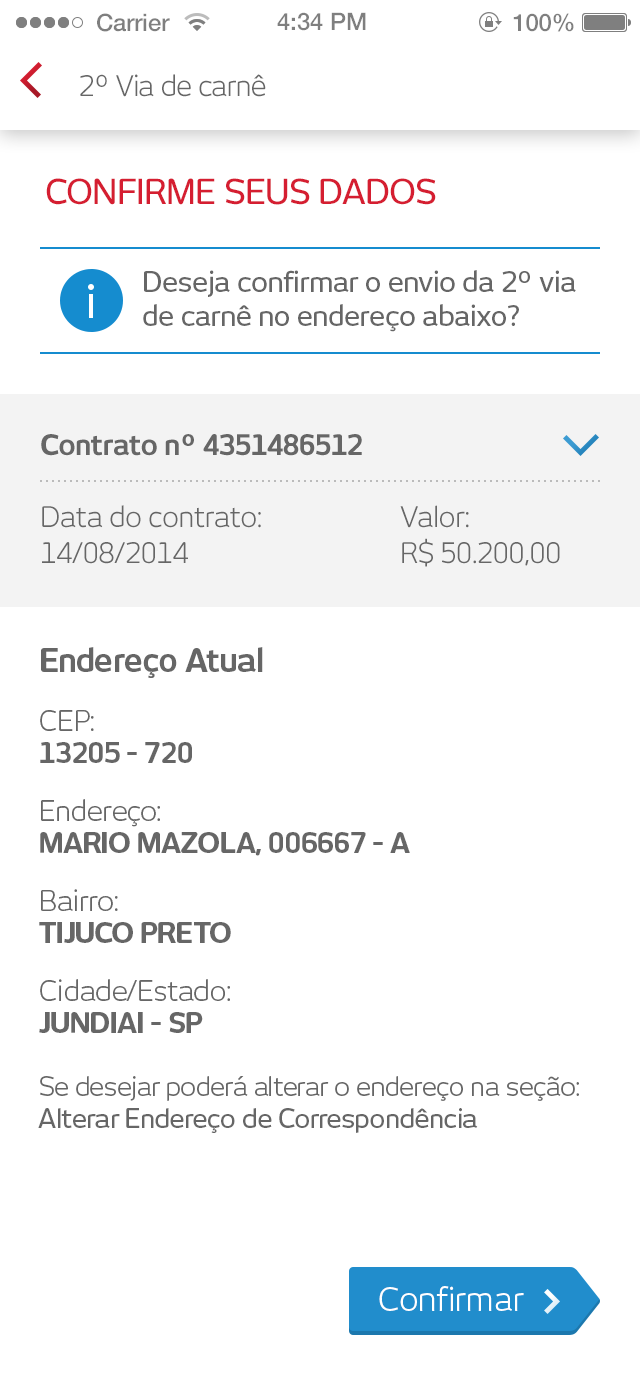
<style>
.page{position:relative;width:640px;height:1387px;background:#ffffff}
.page>*{position:absolute;margin:0}
.t1{font:24px "HelveticaNeue-Medium";color:#7f7f7f}
.t2{font:28px "NewJuneBook";letter-spacing:-0.025em;color:#666666}
.t3{font:34px "NewJuneMedium";letter-spacing:-0.025em;color:#d51e31;text-transform:uppercase}
.t4{font:28px/34px "NewJuneMedium";letter-spacing:-0.025em;color:#666666}
.t5{font:28px/30px "NewJuneMedium";letter-spacing:-0.025em;color:#666666}
.t6{font:28px/36.1px "NewJuneBook";letter-spacing:-0.02em;color:#666666}
.t7{font:28px/36.1px "NewJuneBold";letter-spacing:-0.02em;color:#666666}
.t8{font:32px "NewJuneBold";letter-spacing:-0.025em;color:#666666}
.t9{font:28px/32px "NewJuneBold";letter-spacing:-0.025em;color:#666666}
.t10{font:28px/32px "NewJuneBook";letter-spacing:-0.025em;color:#666666}
.t11{font:26px/32px "NewJuneBook";letter-spacing:-0.025em;color:#666666}
.t12{font:26px/32px "NewJuneMedium";letter-spacing:-0.025em;color:#666666}
.t13{font:32px "NewJuneBook";color:#ffffff}
</style>
<div class="page">
<p class="t1" style="left:97px;top:13px;width:73px;height:19px">Carrier</p>
<p class="t1" style="left:277px;top:12px;width:89px;height:19px">4:34 PM</p>
<p class="t1" style="left:513px;top:13px;width:61px;height:19px">100%</p>
<p class="t2" style="left:80px;top:74px;width:186px;height:23px">2º Via de carnê</p>
<p class="t3" style="left:46px;top:178px;width:390px;height:27px">Confirme seus dados</p>
<p class="t4" style="left:143px;top:270px;width:433px;height:62px"><span class="t5">Deseja confirmar o envio da </span>2º via <br>de carnê no endereço abaixo?</p>
<p class="t6" style="left:41px;top:434px;width:519px;height:133px"><span class="t7">Contrato nº 4351486512<br></span><br>Data do contrato:     Valor:<span class="t7"> <br></span>14/08/2014        R$ 50.200,00</p>
<p class="t8" style="left:41px;top:647px;width:222px;height:31px">Endereço Atual</p>
<p class="t9" style="left:40px;top:710px;width:152px;height:53px"><span class="t10">CEP:<br></span>13205 - 720</p>
<p class="t9" style="left:40px;top:799px;width:370px;height:57px"><span class="t10">Endereço:<br></span>MARIO MAZOLA, 006667 - A</p>
<p class="t9" style="left:39px;top:889px;width:192px;height:54px"><span class="t10">Bairro:<br></span>TIJUCO PRETO</p>
<p class="t10" style="left:39px;top:979px;width:191px;height:54px">Cidade/Estado:<br><span class="t9">JUNDIAI - SP</span></p>
<p class="t11" style="left:38px;top:1076px;width:541px;height:57px">Se desejar poderá alterar o endereço na seção: <br><span class="t12">Alterar Endereço de Correspondência</span></p>
<p class="t13" style="left:379px;top:1286px;width:145px;height:25px">Confirmar</p>
</div>
